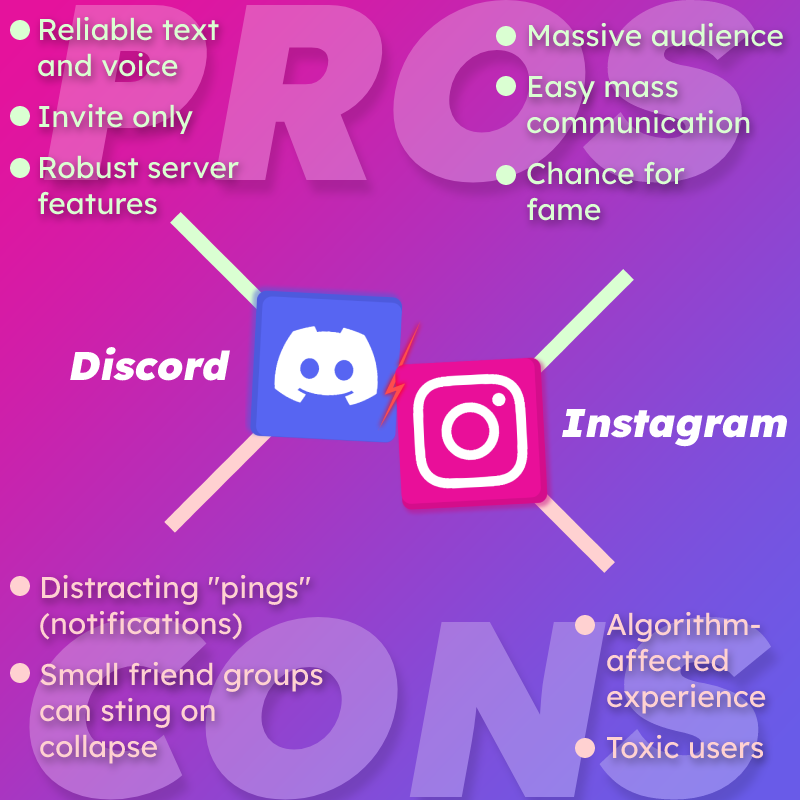
<style>
.page{position:relative;width:800px;height:800px}
.page>*{position:absolute;margin:0}
.t1{font:250px "LexendDeca-Black";font-style:italic}
.t2{font:30px "LexendDeca-Regular";color:#daffd2}
.t3{font:40px "LexendDeca-Black";color:#ffffff;font-style:italic}
.t4{font:30px "LexendDeca-Regular";color:#ffd1d1}
</style>
<div class="page">
<p class="t1" style="left:44px;top:0px;width:711px;height:183px">PROS</p>
<p class="t2" style="left:38px;top:16px;width:201px;height:199px">Reliable text<br>and voice<br>Invite only<br>Robust server<br>features</p>
<p class="t2" style="left:527px;top:22px;width:256px;height:199px">Massive audience<br>Easy mass<br>communication<br>Chance for<br>fame</p>
<p class="t3" style="left:70px;top:347px;width:160px;height:34px">Discord</p>
<p class="t3" style="left:562px;top:409px;width:226px;height:38px">Instagram</p>
<p class="t4" style="left:40px;top:574px;width:283px;height:190px">Distracting "pings" <br>(notifications)<br>Small friend groups<br>can sting on<br>collapse</p>
<p class="t1" style="left:27px;top:617px;width:745px;height:183px">CONS</p>
<p class="t4" style="left:606px;top:611px;width:160px;height:148px">Algorithm-<br>affected<br>experience<br>Toxic users</p>
</div>
